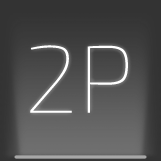
<style>
.page{position:relative;width:161px;height:161px}
.page>*{position:absolute;margin:0}
.t1{font:96px "Exo2-Thin";color:#ffffff}
</style>
<div class="page">
<p class="t1" style="left:30px;top:45px;width:98px;height:68px">2P</p>
</div>
